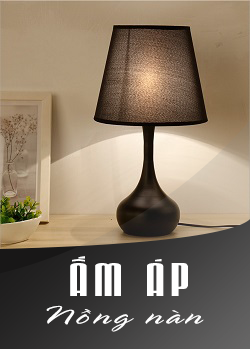
<style>
.page{position:relative;width:250px;height:349px}
.page>*{position:absolute;margin:0}
.t1{font:41px "UTM-Iron-Gothic";letter-spacing:0.1em;color:#ffffff;scale:1.55 1}
.t2{font:25.8px "UTM-Bustamalaka";letter-spacing:0.1em;color:#ffffff;scale:1.55 1}
</style>
<div class="page">
<p class="t1" style="left:70px;top:256px;width:118px;height:40px">ẤM ÁP</p>
<p class="t2" style="left:46px;top:305px;width:158px;height:27px">Nồng nàn</p>
</div>
